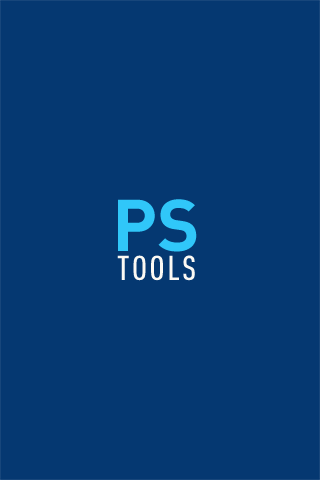
<style>
.page{position:relative;width:320px;height:480px;background:#053871}
.page>*{position:absolute;margin:0}
.t1{font:72px "DIN-Bold";color:#30c7f9}
.t2{font:34px "DINCond-MediumAlternate";letter-spacing:0.075em;color:#fbf9f4}
</style>
<div class="page">
<p class="t1" style="left:118px;top:199px;width:79px;height:53px">PS</p>
<p class="t2" style="left:117px;top:255px;width:78px;height:26px">TOOLS</p>
</div>
